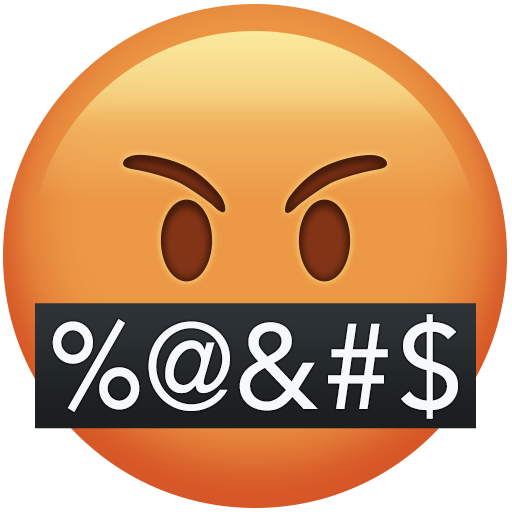
<style>
.page{position:relative;width:512px;height:512px;background:#ffffff}
.page>*{position:absolute;margin:0}
.t1{font:120px "Avenir-Roman";letter-spacing:0.025em;color:#f5f9f9;text-transform:uppercase}
.t2{font:120px "Avenir-Roman";letter-spacing:0.025em;color:#f5f9f9;text-transform:uppercase;scale:0.95 1}
</style>
<div class="page">
<p class="t1" style="left:401px;top:314px;width:57px;height:105px">$</p>
<p class="t2" style="left:52px;top:319px;width:88px;height:93px">%</p>
<p class="t2" style="left:148px;top:321px;width:82px;height:90px">@</p>
<p class="t1" style="left:239px;top:322px;width:79px;height:89px">&amp;</p>
<p class="t1" style="left:328px;top:323px;width:60px;height:86px">#</p>
</div>
